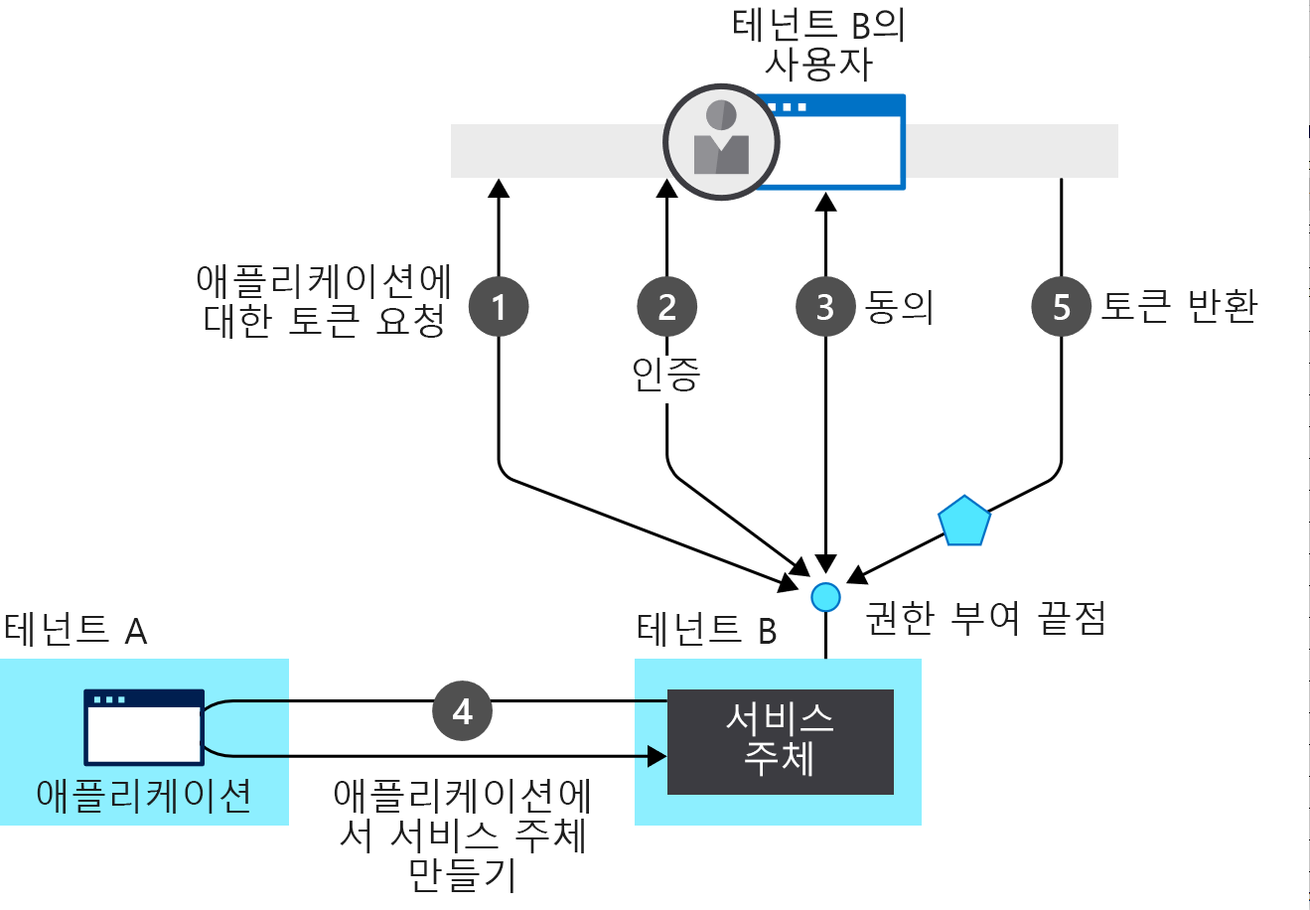
<style>
.page{position:relative;width:1310px;height:910px;background:#ffffff}
.page>*{position:absolute;margin:0}
.t1{font:36.8px/39.7px "MalgunGothic";color:#1e1e1e}
.t2{font:36.8px/39.7px "SegoeUI";color:#1e1e1e}
.t3{font:36.8px "MalgunGothic";color:#1e1e1e}
.t4{font:36.8px "SegoeUI-Semibold";color:#ffffff}
.t5{font:36.8px "SegoeUI";color:#1e1e1e}
.t6{font:36.8px/39.7px "MalgunGothic";color:#ffffff}
</style>
<div class="page">
<p class="t1" style="left:734px;top:7px;width:169px;height:75px;text-align:center">테넌트<span class="t2"> B</span>의 사용자</p>
<p class="t1" style="left:197px;top:264px;width:253px;height:75px;text-align:center">애플리케이션에 대한 토큰 요청</p>
<p class="t3" style="left:865px;top:290px;width:67px;height:35px">동의</p>
<p class="t3" style="left:1102px;top:289px;width:157px;height:34px">토큰 반환</p>
<p class="t4" style="left:493px;top:294px;width:11px;height:26px">1</p>
<p class="t4" style="left:659px;top:294px;width:17px;height:26px">2</p>
<p class="t4" style="left:818px;top:294px;width:16px;height:26px">3</p>
<p class="t4" style="left:1054px;top:294px;width:17px;height:26px">5</p>
<p class="t3" style="left:634px;top:358px;width:66px;height:33px">인증</p>
<p class="t3" style="left:866px;top:601px;width:238px;height:35px">권한 부여 끝점</p>
<p class="t3" style="left:5px;top:612px;width:143px;height:35px">테넌트 <span class="t5">A</span></p>
<p class="t3" style="left:638px;top:612px;width:139px;height:35px">테넌트 <span class="t5">B</span></p>
<p class="t4" style="left:453px;top:698px;width:20px;height:26px">4</p>
<p class="t6" style="left:726px;top:701px;width:108px;height:76px;text-align:center">서비스 주체</p>
<p class="t3" style="left:37px;top:779px;width:212px;height:35px">애플리케이션</p>
<p class="t1" style="left:334px;top:779px;width:255px;height:114px;text-align:center">애플리케이션에서 서비스 주체 만들기</p>
</div>
